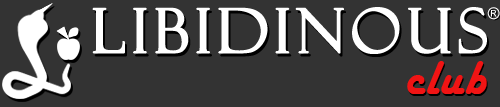
<style>
.page{position:relative;width:500px;height:107px;background:#333333}
.page>*{position:absolute;margin:0}
.t1{font:61px "FelixTitlingMT";letter-spacing:0.07em;color:#ffffff;font-weight:bold}
.t2{font:16px "Arial-ItalicMT";letter-spacing:0.02em;color:#ffffff}
.t3{font:50px "HarlowSolid";letter-spacing:0.02em;color:#f01414}
</style>
<div class="page">
<p class="t1" style="left:92px;top:7px;width:395px;height:47px">LIbidinous</p>
<p class="t2" style="left:487px;top:7px;width:13px;height:13px">®</p>
<p class="t3" style="left:407px;top:61px;width:80px;height:33px">club</p>
</div>
